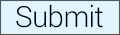
<style>
.page{position:relative;width:120px;height:35px;background:#e1f5fe}
.page>*{position:absolute;margin:0}
.t1{font:29.2px "Roboto-Light";letter-spacing:-0.02em;color:#010101}
</style>
<div class="page">
<p class="t1" style="left:16px;top:4px;width:87px;height:24px">Submit</p>
</div>
